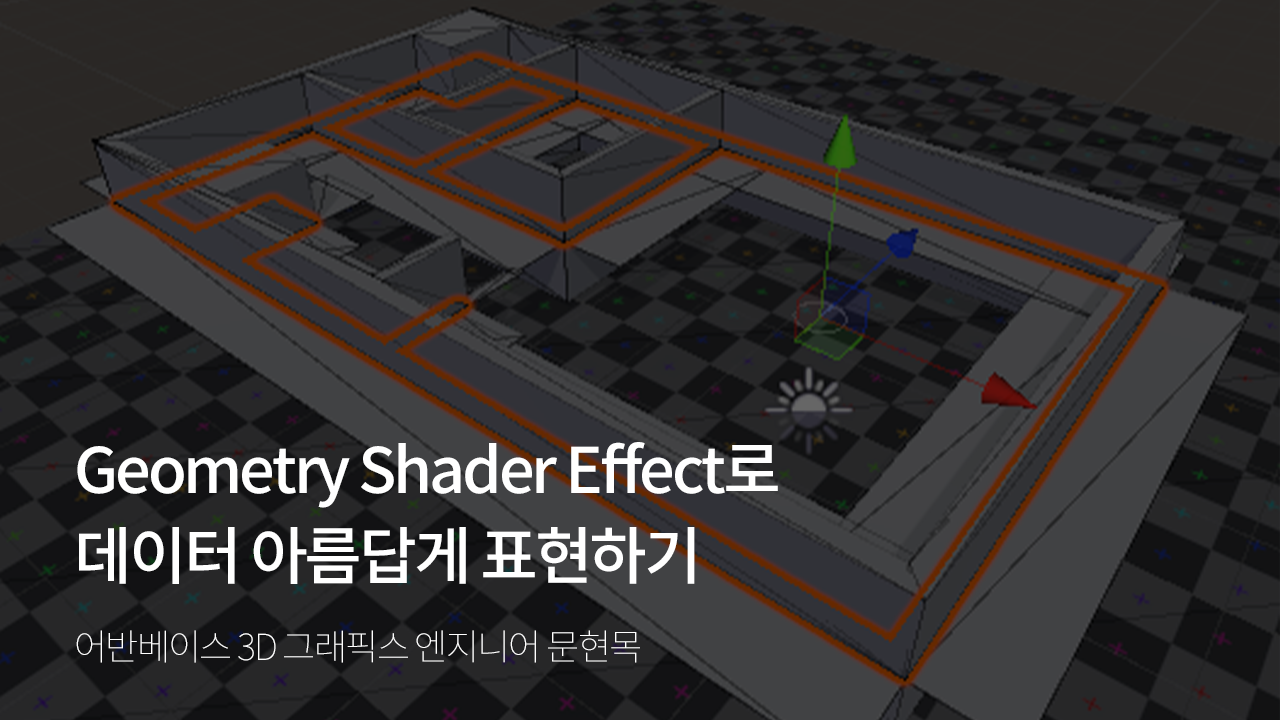
<style>
.page{position:relative;width:1280px;height:720px}
.page>*{position:absolute;margin:0}
.t1{font:63px/86.3px "NotoSansCJKkr-Medium";letter-spacing:-0.05em;color:#ffffff}
.t2{font:36.1px "NotoSansCJKkr-Thin";letter-spacing:-0.05em;color:#ffffff;text-transform:uppercase}
</style>
<div class="page">
<p class="t1" style="left:77px;top:442px;width:701px;height:142px">Geometry Shader Effect로 <br>데이터 아름답게 표현하기</p>
<p class="t2" style="left:76px;top:630px;width:564px;height:33px">어반베이스 3D 그래픽스 엔지니어 문현목</p>
</div>
